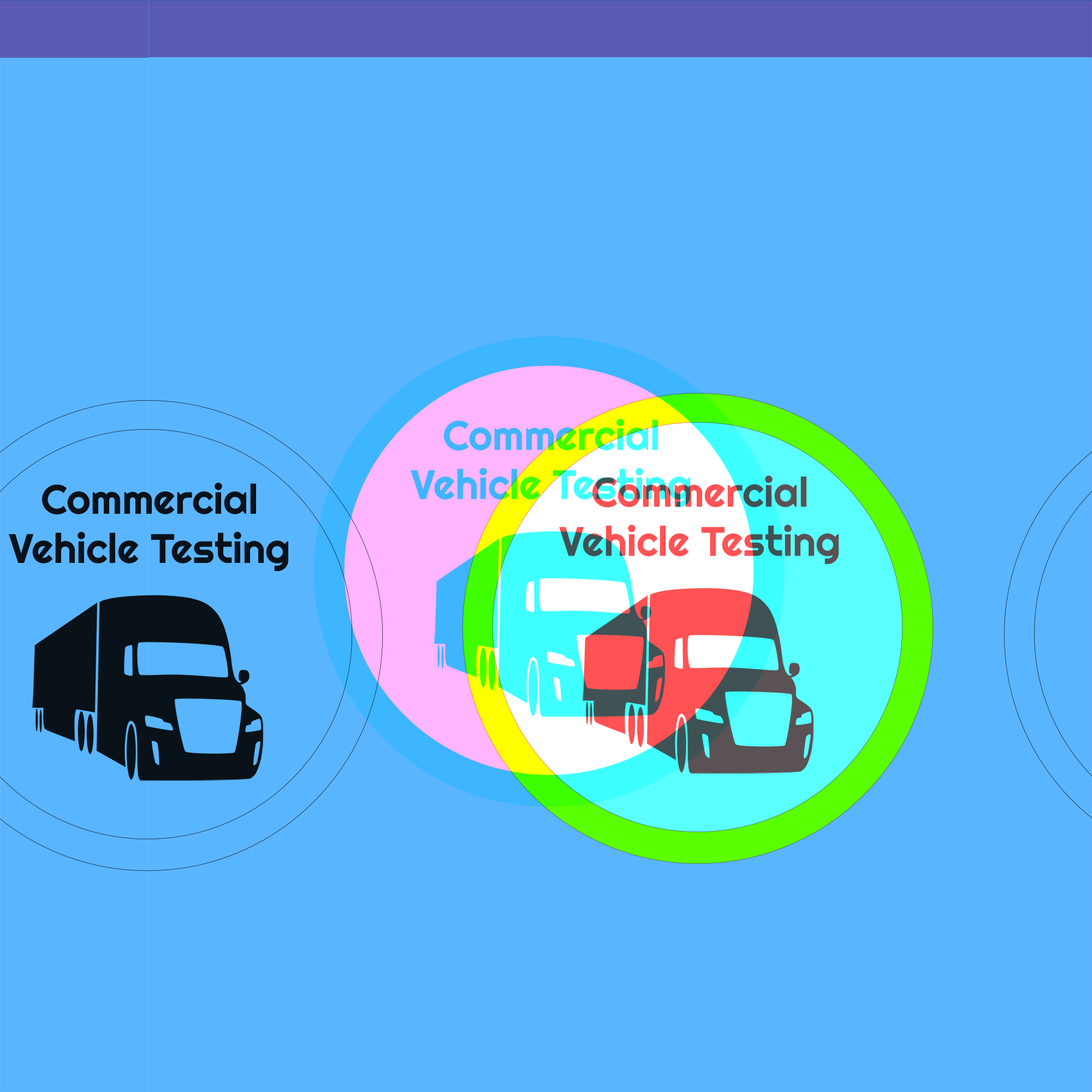
<style>
.page{position:relative;width:1092px;height:1092px;background:#5ab5ff}
.page>*{position:absolute;margin:0}
.t1{font:41.2px "Righteous-Regular"}
</style>
<div class="page">
<p class="t1" style="left:411px;top:418px;width:279px;height:89px;text-align:center">Commercial<br>Vehicle Testing</p>
</div>
